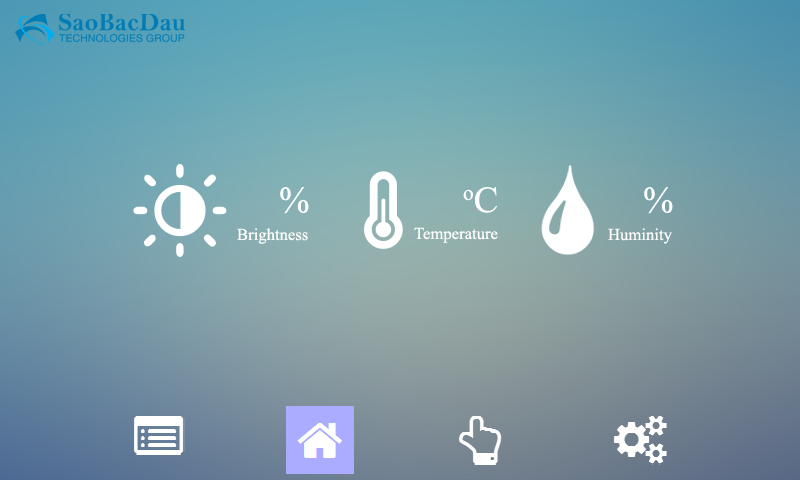
<style>
.page{position:relative;width:800px;height:480px}
.page>*{position:absolute;margin:0}
.t1{font:36.7px "TimesNewRomanPSMT";color:#ffffff}
.t2{font:16.7px "TimesNewRomanPSMT";color:#ffffff}
</style>
<div class="page">
<p class="t1" style="left:280px;top:187px;width:29px;height:27px">%</p>
<p class="t1" style="left:463px;top:187px;width:34px;height:26px">oC</p>
<p class="t1" style="left:644px;top:187px;width:29px;height:27px">%</p>
<p class="t2" style="left:237px;top:228px;width:71px;height:16px">Brightness</p>
<p class="t2" style="left:414px;top:227px;width:84px;height:16px">Temperature</p>
<p class="t2" style="left:608px;top:228px;width:64px;height:16px">Huminity</p>
</div>
